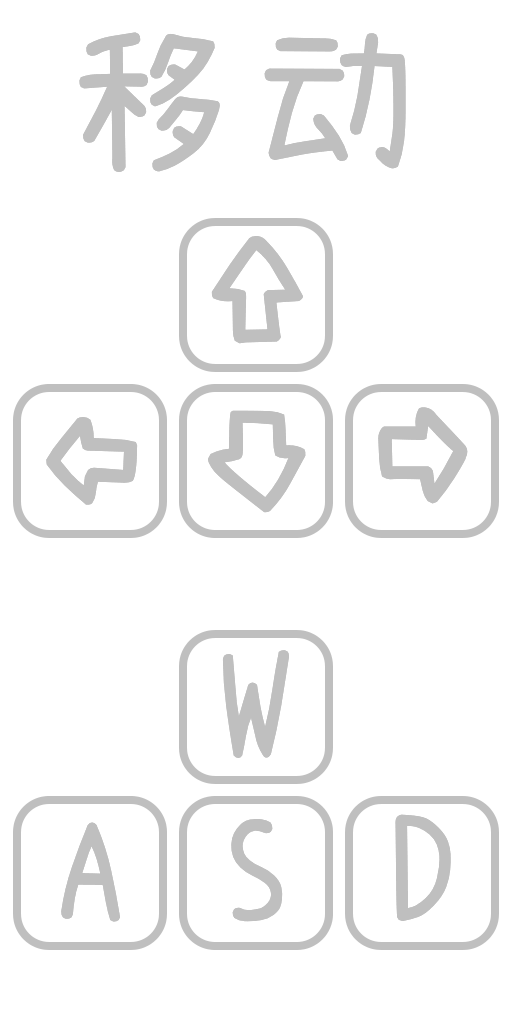
<style>
.page{position:relative;width:512px;height:1024px;background:#ffffff}
.page>*{position:absolute;margin:0}
.t1{font:160px "SetoFont-SC";letter-spacing:0.16em;color:#bfbfbf}
.t2{font:210px "SetoFont-SC";color:#bfbfbf}
.t3{font:140px "SetoFont-SC";color:#bfbfbf}
</style>
<div class="page">
<p class="t1" style="left:79px;top:32px;width:327px;height:140px">移动</p>
<p class="t2" style="left:211px;top:236px;width:92px;height:108px">⇧</p>
<p class="t2" style="left:208px;top:410px;width:98px;height:103px">⇩</p>
<p class="t2" style="left:378px;top:407px;width:90px;height:97px">⇨</p>
<p class="t2" style="left:46px;top:417px;width:92px;height:88px">⇦</p>
<p class="t3" style="left:222px;top:650px;width:67px;height:108px">W</p>
<p class="t3" style="left:61px;top:822px;width:59px;height:100px">A</p>
<p class="t3" style="left:231px;top:819px;width:52px;height:103px">S</p>
<p class="t3" style="left:395px;top:814px;width:56px;height:107px">D</p>
</div>
